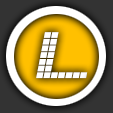
<style>
.page{position:relative;width:113px;height:113px}
.page>*{position:absolute;margin:0}
.t1{font:101.2px "Arcade";letter-spacing:-0.025em;color:#ffffff;font-style:italic;scale:1.09 1}
</style>
<div class="page">
<p class="t1" style="left:36px;top:32px;width:52px;height:47px">L</p>
</div>
